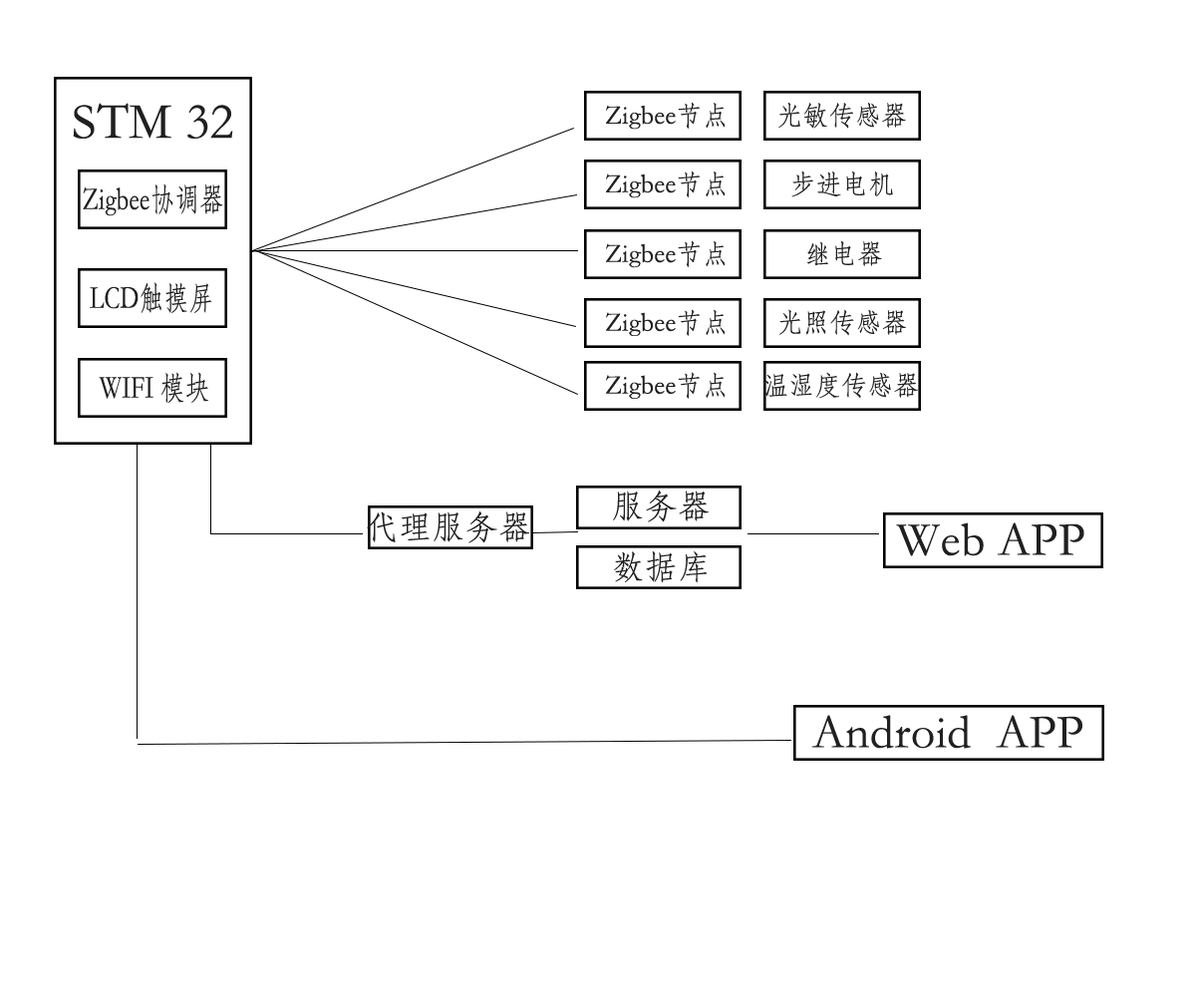
<style>
.page{position:relative;width:1196px;height:997px;background:#ffffff}
.page>*{position:absolute;margin:0}
.t1{font:26.9px "STFangsong";letter-spacing:0.01em;color:#202021;scale:0.96 1}
.t2{font:51.2px "STFangsong";letter-spacing:0.01em;color:#202021}
.t3{font:32.3px "STFangsong";letter-spacing:0.01em;color:#202021;scale:0.76 1}
.t4{font:32.9px "STFangsong";letter-spacing:0.01em;color:#202021}
.t5{font:47.8px "STFangsong";letter-spacing:0.01em;color:#202021}
</style>
<div class="page">
<p class="t1" style="left:606px;top:102px;width:119px;height:28px">Zigbee节点</p>
<p class="t1" style="left:779px;top:102px;width:127px;height:27px">光敏传感器</p>
<p class="t2" style="left:73px;top:103px;width:160px;height:36px">STM 32</p>
<p class="t1" style="left:606px;top:170px;width:119px;height:28px">Zigbee节点</p>
<p class="t1" style="left:791px;top:170px;width:102px;height:27px">步进电机</p>
<p class="t3" style="left:83px;top:183px;width:140px;height:33px">Zigbee协调器</p>
<p class="t1" style="left:606px;top:240px;width:119px;height:28px">Zigbee节点</p>
<p class="t1" style="left:807px;top:240px;width:75px;height:26px">继电器</p>
<p class="t3" style="left:90px;top:282px;width:122px;height:31px">LCD触摸屏</p>
<p class="t1" style="left:606px;top:309px;width:119px;height:27px">Zigbee节点</p>
<p class="t1" style="left:779px;top:309px;width:127px;height:27px">光照传感器</p>
<p class="t3" style="left:99px;top:372px;width:109px;height:31px">WIFI 模块</p>
<p class="t1" style="left:606px;top:372px;width:119px;height:27px">Zigbee节点</p>
<p class="t1" style="left:765px;top:372px;width:153px;height:27px">温湿度传感器</p>
<p class="t4" style="left:613px;top:490px;width:96px;height:32px">服务器</p>
<p class="t4" style="left:367px;top:511px;width:162px;height:32px">代理服务器</p>
<p class="t5" style="left:896px;top:522px;width:189px;height:34px">Web APP</p>
<p class="t4" style="left:614px;top:551px;width:94px;height:32px">数据库</p>
<p class="t5" style="left:811px;top:715px;width:272px;height:34px">Android  APP</p>
</div>
